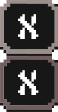
<style>
.page{position:relative;width:58px;height:112px;background:#171717}
.page>*{position:absolute;margin:0}
.t1{font:36px "Alagard";color:#ffffff}
</style>
<div class="page">
<p class="t1" style="left:18px;top:14px;width:21px;height:25px">X</p>
<p class="t1" style="left:18px;top:70px;width:21px;height:25px">X</p>
</div>
